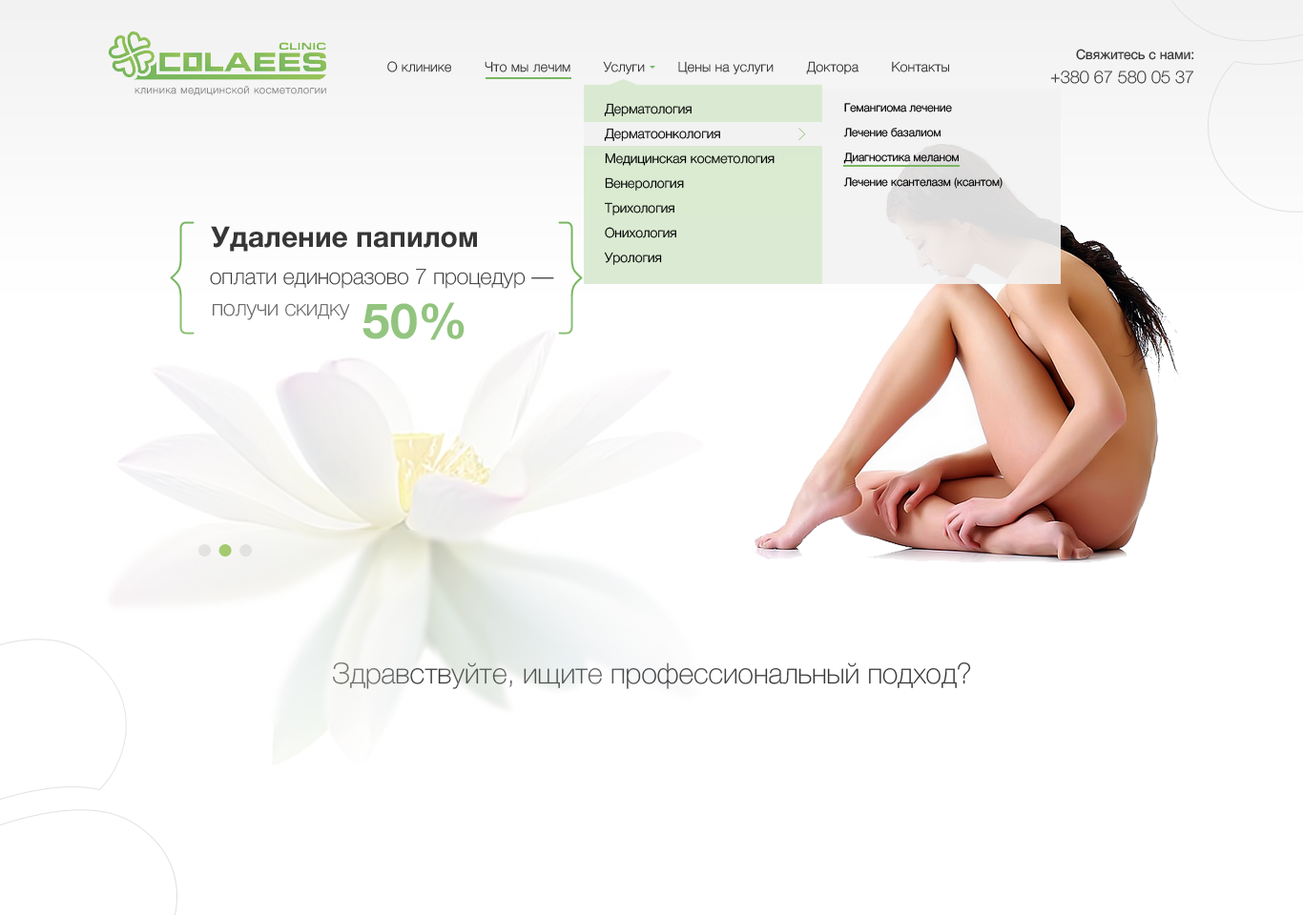
<style>
.page{position:relative;width:1303px;height:915px;background:#ffffff}
.page>*{position:absolute;margin:0}
.t1{font:13.4px "HelveticaNeueCyr-Roman";color:#363636}
.t2{font:13.4px "HelveticaNeueCyr-Thin";letter-spacing:0.03em;color:#363636}
.t3{font:17.2px "HelveticaNeueCyr-Thin";color:#363636}
.t4{font:10.5px "HelveticaNeueCyr-Thin";letter-spacing:0.075em;color:#898989}
.t5{font:13.4px/24.8px "HelveticaNeueCyr-Light";color:#000000}
.t6{font:11.4px/24.8px "HelveticaNeueCyr-Light";color:#000000}
.t7{font:28.6px "HelveticaNeueCyr-Bold";color:#363636}
.t8{font:21.9px "HelveticaNeueCyr-Thin";color:#363636}
.t9{font:21.9px "HelveticaNeueCyr-Thin";color:#5a5a5a}
.t10{font:49.6px "HelveticaNeueCyr-Bold";color:#92c47f}
.t11{font:28.6px "HelveticaNeueCyr-Thin";color:#404041}
</style>
<div class="page">
<p class="t1" style="left:1076px;top:49px;width:118px;height:11px">Свяжитесь с нами:</p>
<p class="t2" style="left:387px;top:61px;width:562px;height:13px">О клинике        Что мы лечим        Услуги        Цены на услуги        Доктора        Контакты</p>
<p class="t3" style="left:1050px;top:71px;width:144px;height:13px">+380 67 580 05 37</p>
<p class="t4" style="left:134px;top:86px;width:192px;height:9px">клиника медицинской косметологии</p>
<p class="t5" style="left:604px;top:103px;width:170px;height:162px">Дерматология<br>Дерматоонкология<br>Медицинская косметология<br>Венерология <br>Трихология<br>Онихология<br>Урология</p>
<p class="t6" style="left:843px;top:103px;width:159px;height:86px">Гемангиома лечение<br>Лечение базалиом<br>Диагностика меланом<br>Лечение ксантелазм (ксантом)</p>
<p class="t7" style="left:211px;top:226px;width:266px;height:26px">Удаление папилом</p>
<p class="t8" style="left:210px;top:269px;width:344px;height:20px">оплати единоразово 7 процедур —</p>
<p class="t9" style="left:213px;top:303px;width:137px;height:17px">получи скидку</p>
<p class="t10" style="left:362px;top:302px;width:102px;height:38px">50%</p>
<p class="t11" style="left:333px;top:663px;width:638px;height:26px">Здравствуйте, ищите профессиональный подход?</p>
</div>
